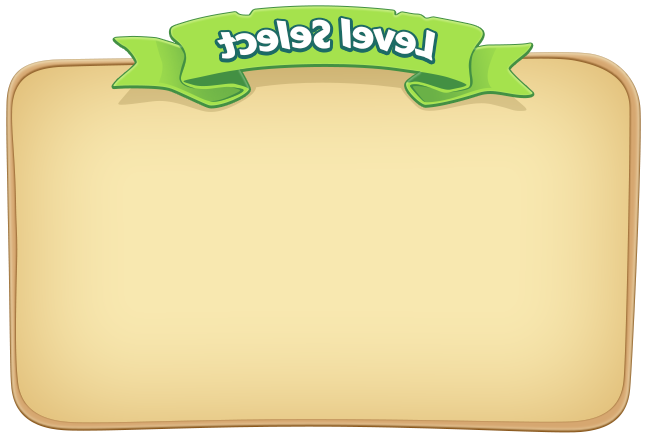
<style>
.page{position:relative;width:647px;height:439px}
.page>*{position:absolute;margin:0}
.t1{font:38px "CarterOne";letter-spacing:-0.02em;color:#ffffff}
</style>
<div class="page">
<p class="t1" style="left:217px;top:17px;width:218px;height:44px;rotate:180deg">Level Select</p>
</div>
